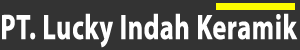
<style>
.page{position:relative;width:300px;height:50px;background:#333333}
.page>*{position:absolute;margin:0}
.t1{font:35.7px "MyriadPro-Bold";color:#ffffff;font-weight:bold;scale:0.73 1}
</style>
<div class="page">
<p class="t1" style="left:2px;top:13px;width:296px;height:35px">PT. Lucky Indah Keramik</p>
</div>
